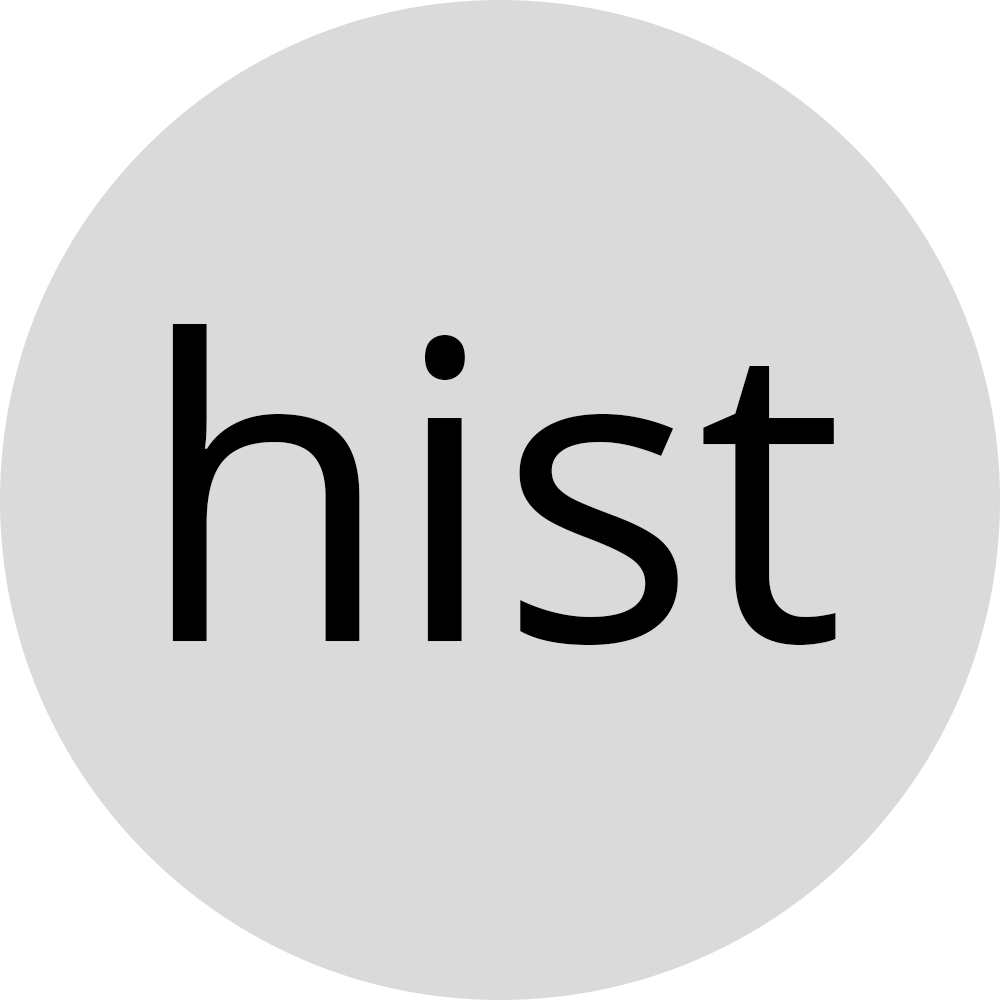
<style>
.page{position:relative;width:1000px;height:1000px;background:#dadada}
.page>*{position:absolute;margin:0}
.t1{font:416.7px "OpenSans";color:#000000}
</style>
<div class="page">
<p class="t1" style="left:172px;top:324px;width:664px;height:321px">hist</p>
</div>
